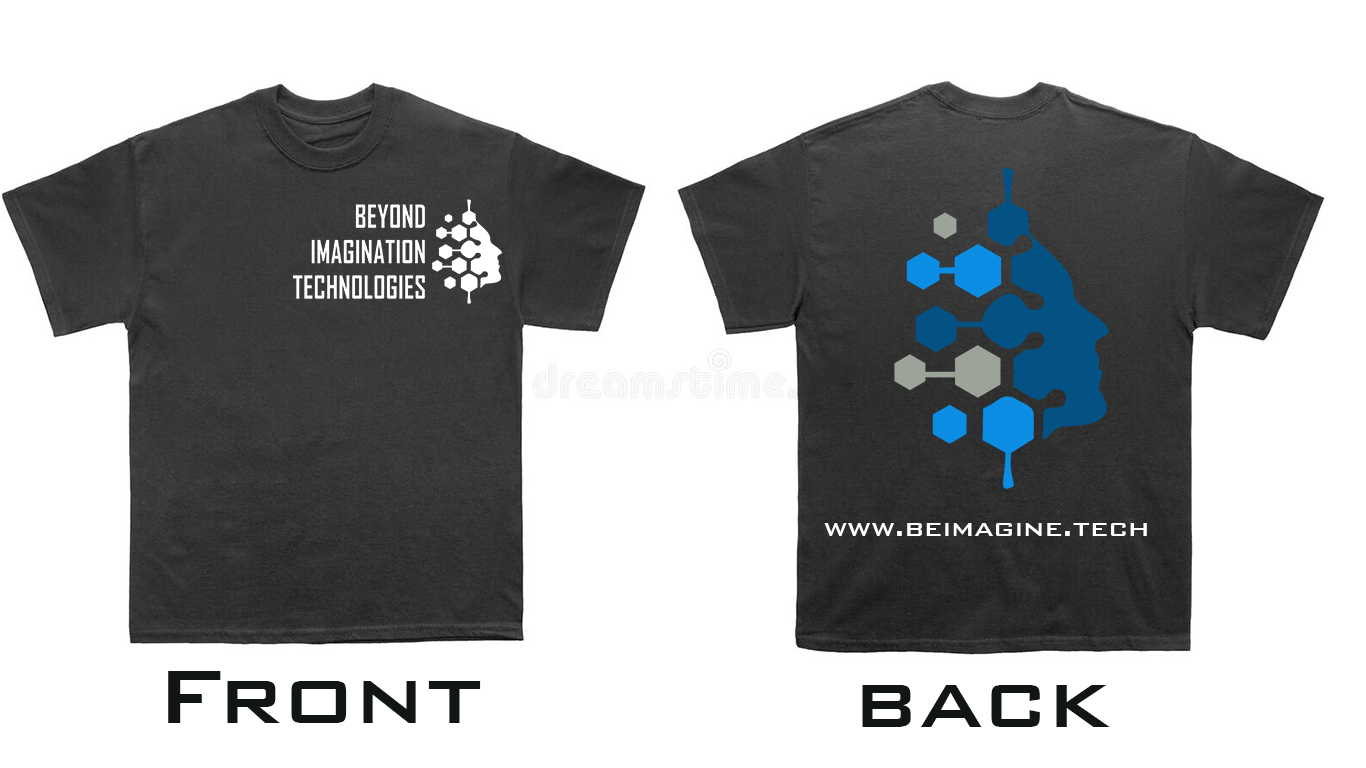
<style>
.page{position:relative;width:1366px;height:768px;background:#ffffff}
.page>*{position:absolute;margin:0}
.t1{font:30px "BankGothicBT-Medium";color:#ffffff}
.t2{font:100px "BankGothicBT-Medium";color:#121516}
</style>
<div class="page">
<p class="t1" style="left:824px;top:523px;width:323px;height:13px">www.beimagine.tech</p>
<p class="t2" style="left:168px;top:671px;width:313px;height:52px">Front</p>
<p class="t2" style="left:862px;top:685px;width:248px;height:42px">back</p>
</div>
